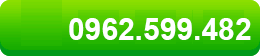
<style>
.page{position:relative;width:260px;height:56px}
.page>*{position:absolute;margin:0}
.t1{font:30px "Arial-BoldMT";color:#ffffff}
</style>
<div class="page">
<p class="t1" style="left:69px;top:18px;width:182px;height:22px">0962.599.482</p>
</div>
